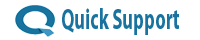
<style>
.page{position:relative;width:200px;height:40px;background:#ffffff}
.page>*{position:absolute;margin:0}
.t1{font:29.4px "MyriadPro-Bold";color:#18739f;scale:0.63 1}
</style>
<div class="page">
<p class="t1" style="left:62px;top:8px;width:117px;height:27px">Quick Support</p>
</div>
